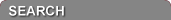
<style>
.page{position:relative;width:171px;height:20px;background:#858585}
.page>*{position:absolute;margin:0}
.t1{font:13.3px "Arial-BoldMT";color:#ffffff}
</style>
<div class="page">
<p class="t1" style="left:9px;top:5px;width:55px;height:11px">SEARCH</p>
</div>
